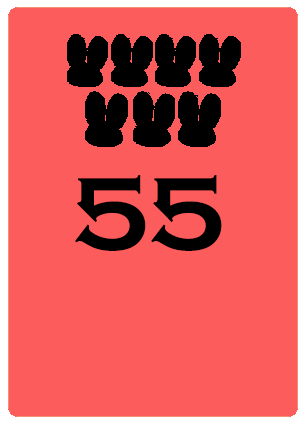
<style>
.page{position:relative;width:306px;height:423px;background:#fd5c5c}
.page>*{position:absolute;margin:0}
.t1{font:106.7px "CopperplateGothic-Bold";color:#000000}
</style>
<div class="page">
<p class="t1" style="left:75px;top:175px;width:147px;height:76px">55</p>
</div>
